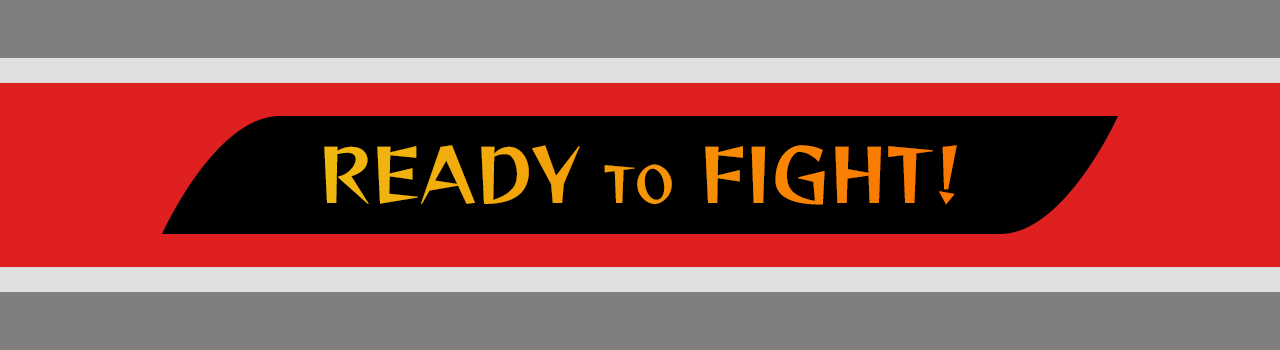
<style>
.page{position:relative;width:1280px;height:350px;background:#7f7f7f}
.page>*{position:absolute;margin:0}
.t1{font:72px "ReggaeOne-Regular"}
.t2{font:48px "ReggaeOne-Regular"}
</style>
<div class="page">
<p class="t1" style="left:324px;top:145px;width:633px;height:60px">READY <span class="t2">TO</span> FIGHT!</p>
</div>
